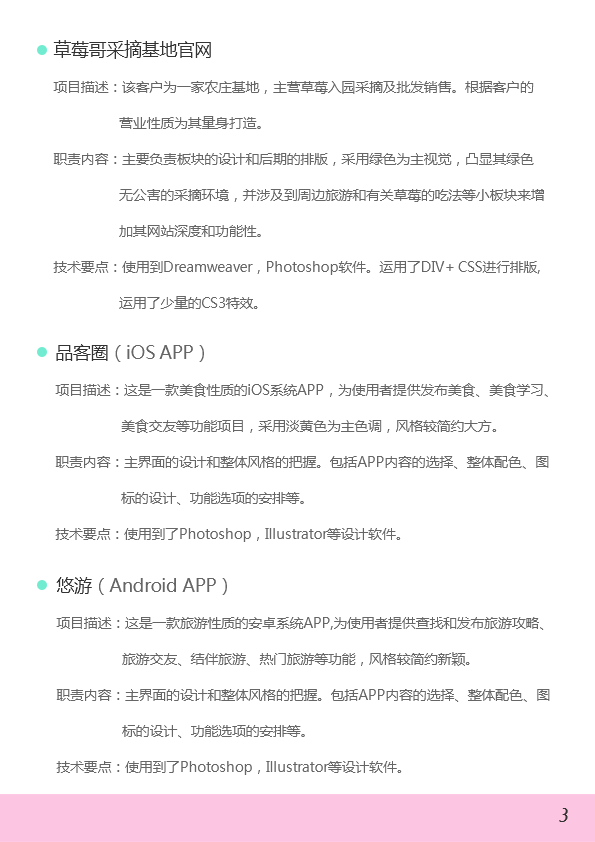
<style>
.page{position:relative;width:595px;height:842px;background:#ffffff}
.page>*{position:absolute;margin:0}
.t1{font:14px/36px "MicrosoftYaHei";letter-spacing:-0.02em;color:#666666}
.t2{font:18px/46px "MicrosoftYaHei";letter-spacing:-0.02em;color:#333333}
.t3{font:18px/46px "MicrosoftYaHei";letter-spacing:-0.02em;color:#666666}
.t4{font:18px "Freehand521BT-RegularC";letter-spacing:-0.02em;color:#333333}
</style>
<div class="page">
<p class="t1" style="left:53px;top:40px;width:491px;height:269px"><span class="t2">草莓哥采摘基地官网<br></span>项目描述：该客户为一家农庄基地，主营草莓入园采摘及批发销售。根据客户的<br>         营业性质为其量身打造。<br>职责内容：主要负责板块的设计和后期的排版，采用绿色为主视觉，凸显其绿色<br>         无公害的采摘环境，并涉及到周边旅游和有关草莓的吃法等小板块来增<br>         加其网站深度和功能性。<br>技术要点：使用到Dreamweaver，Photoshop软件。运用了DIV+ CSS进行排版,<br>         运用了少量的CS3特效。</p>
<p class="t1" style="left:55px;top:344px;width:494px;height:198px"><span class="t2">品客圈</span><span class="t3">（iOS APP）<br></span>项目描述：这是一款美食性质的iOS系统APP，为使用者提供发布美食、美食学习、<br>         美食交友等功能项目，采用淡黄色为主色调，风格较简约大方。<br>职责内容：主界面的设计和整体风格的把握。包括APP内容的选择、整体配色、图<br>         标的设计、功能选项的安排等。<br>技术要点：使用到了Photoshop，Illustrator等设计软件。</p>
<p class="t1" style="left:56px;top:577px;width:494px;height:198px"><span class="t2">悠游</span><span class="t3">（Android APP）<br></span>项目描述：这是一款旅游性质的安卓系统APP,为使用者提供查找和发布旅游攻略、<br>         旅游交友、结伴旅游、热门旅游等功能，风格较简约新颖。<br>职责内容：主界面的设计和整体风格的把握。包括APP内容的选择、整体配色、图<br>         标的设计、功能选项的安排等。<br>技术要点：使用到了Photoshop，Illustrator等设计软件。</p>
<p class="t4" style="left:559px;top:808px;width:9px;height:14px">3</p>
</div>
